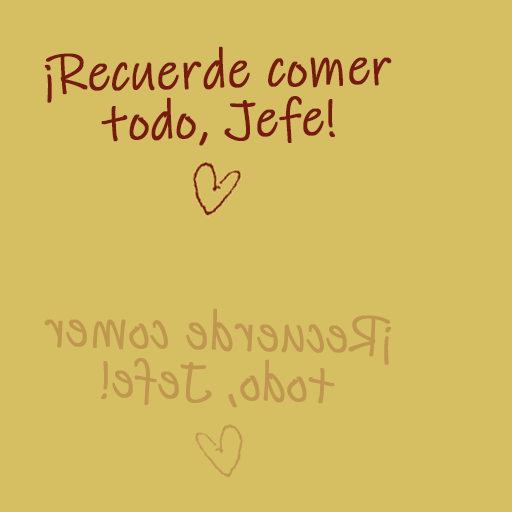
<style>
.page{position:relative;width:512px;height:512px;background:#d6be63}
.page>*{position:absolute;margin:0}
.t1{font:54.1px/50px "InkFree";color:#791a10;font-weight:bold;scale:0.91 1}
</style>
<div class="page">
<p class="t1" style="left:44px;top:46px;width:348px;height:100px;text-align:center;rotate:-1deg">¡Recuerde comer<br>todo, Jefe!</p>
</div>
